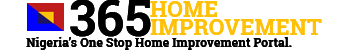
<style>
.page{position:relative;width:350px;height:50px;background:#ffffff}
.page>*{position:absolute;margin:0}
.t1{font:50px "RobotoSlab-Bold";letter-spacing:0.01em;color:#000000}
.t2{font:22px "RobotoSlab-Bold";letter-spacing:0.01em;color:#ffc107}
.t3{font:12px "RobotoSlab-Bold";letter-spacing:0.01em;color:#000000}
</style>
<div class="page">
<p class="t1" style="left:70px;top:0px;width:81px;height:37px">365</p>
<p class="t2" style="left:150px;top:1px;width:67px;height:16px">HOME</p>
<p class="t2" style="left:150px;top:19px;width:172px;height:16px">IMPROVEMENT</p>
<p class="t3" style="left:26px;top:37px;width:266px;height:13px">Nigeria’s One Stop Home Improvement Portal.</p>
</div>
